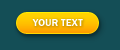
<style>
.page{position:relative;width:120px;height:50px;background:#144e56}
.page>*{position:absolute;margin:0}
.t1{font:10px "FranklinGothicDemiC";color:#ffffff;text-transform:uppercase}
</style>
<div class="page">
<p class="t1" style="left:32px;top:19px;width:51px;height:7px">your text</p>
</div>
